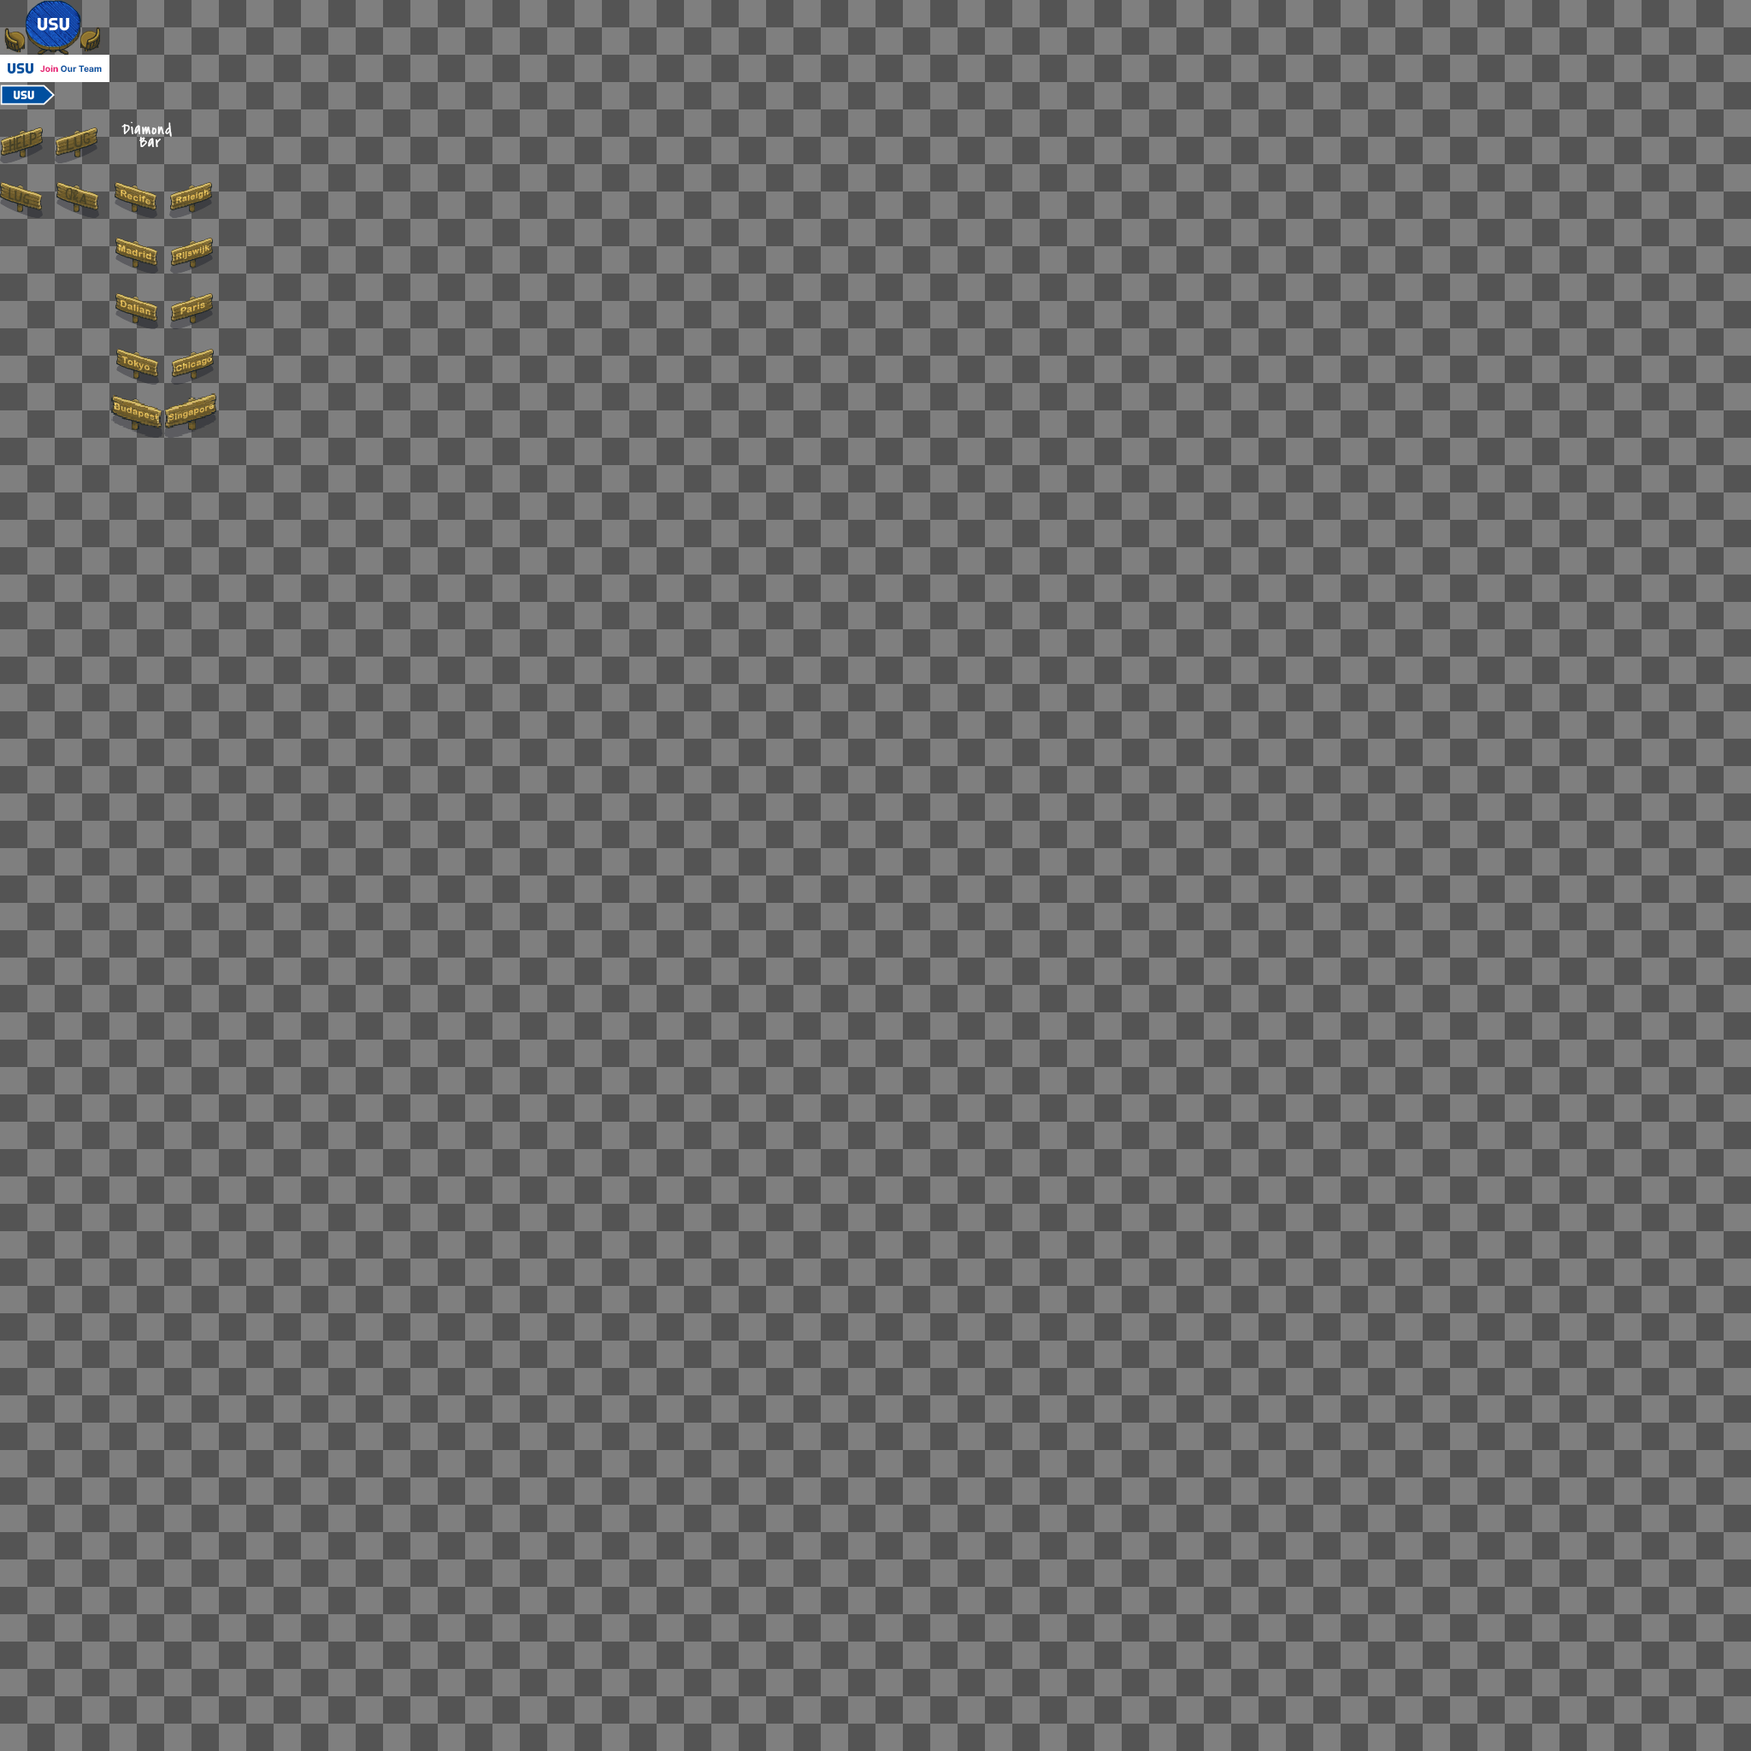
<style>
.page{position:relative;width:1751px;height:1751px;background:#7f7f7f}
.page>*{position:absolute;margin:0}
.t1{font:15.9px/13.2px "CoveredByYourGrace";letter-spacing:0.06em;color:#ffffff}
.t2{font:9px "ArialRoundedMTBold";letter-spacing:0.06em;color:#deb654;scale:1.04 1}
.t3{font:8.1px "ArialRoundedMTBold";letter-spacing:0.06em;color:#dcb654;scale:1.04 1}
.t4{font:9px "ArialRoundedMTBold";letter-spacing:0.06em;color:#dbb656;scale:1.04 1}
.t5{font:8.1px "ArialRoundedMTBold";letter-spacing:0.06em;color:#dab256;scale:1.04 1}
.t6{font:9px "ArialRoundedMTBold";letter-spacing:0.06em;color:#d8b656;scale:1.04 1}
.t7{font:9.1px "ArialRoundedMTBold";letter-spacing:0.06em;color:#e0b756;scale:1.04 1}
.t8{font:9px "ArialRoundedMTBold";letter-spacing:0.06em;color:#dab656;scale:1.04 1}
.t9{font:8.3px "ArialRoundedMTBold";letter-spacing:0.06em;color:#e0b854;scale:1.04 1}
.t10{font:8.7px "ArialRoundedMTBold";letter-spacing:0.06em;color:#e0b858;scale:1.04 1}
.t11{font:8.3px "ArialRoundedMTBold";letter-spacing:0.06em;color:#d6b254;scale:1.04 1}
</style>
<div class="page">
<p class="t1" style="left:121px;top:121px;width:51px;height:26px;text-align:center">Diamond <br>Bar</p>
<p class="t2" style="left:121px;top:189px;width:29px;height:16px;rotate:16deg">Recife</p>
<p class="t3" style="left:176px;top:189px;width:33px;height:14px;rotate:-15deg">Raleigh</p>
<p class="t4" style="left:118px;top:244px;width:33px;height:16px;rotate:16deg">Madrid</p>
<p class="t5" style="left:176px;top:245px;width:33px;height:15px;rotate:-15deg">Rijswijk</p>
<p class="t6" style="left:121px;top:300px;width:29px;height:15px;rotate:16deg">Dalian</p>
<p class="t7" style="left:180px;top:302px;width:25px;height:13px;rotate:-15deg">Paris</p>
<p class="t8" style="left:121px;top:356px;width:29px;height:15px;rotate:16deg">Tokyo</p>
<p class="t9" style="left:176px;top:357px;width:36px;height:15px;rotate:-15deg">Chicago</p>
<p class="t10" style="left:114px;top:403px;width:44px;height:18px;rotate:16deg">Budapest</p>
<p class="t11" style="left:168px;top:404px;width:46px;height:17px;rotate:-15deg">Singapore</p>
</div>
